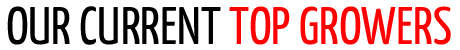
<style>
.page{position:relative;width:460px;height:50px;background:#ffffff}
.page>*{position:absolute;margin:0}
.t1{font:53px "YanoneKaffeesatz-Regular";color:#000000;text-transform:uppercase}
.t2{font:53px "YanoneKaffeesatz-Regular";color:#ff0000;text-transform:uppercase}
</style>
<div class="page">
<p class="t1" style="left:7px;top:6px;width:444px;height:39px">our current <span class="t2">top growers</span></p>
</div>
